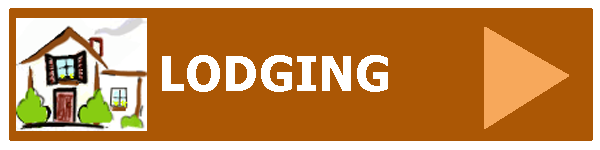
<style>
.page{position:relative;width:600px;height:150px;background:#ab5705}
.page>*{position:absolute;margin:0}
.t1{font:48px "Tahoma-Bold";color:#ffffff}
</style>
<div class="page">
<p class="t1" style="left:162px;top:55px;width:226px;height:37px">LODGING</p>
</div>
